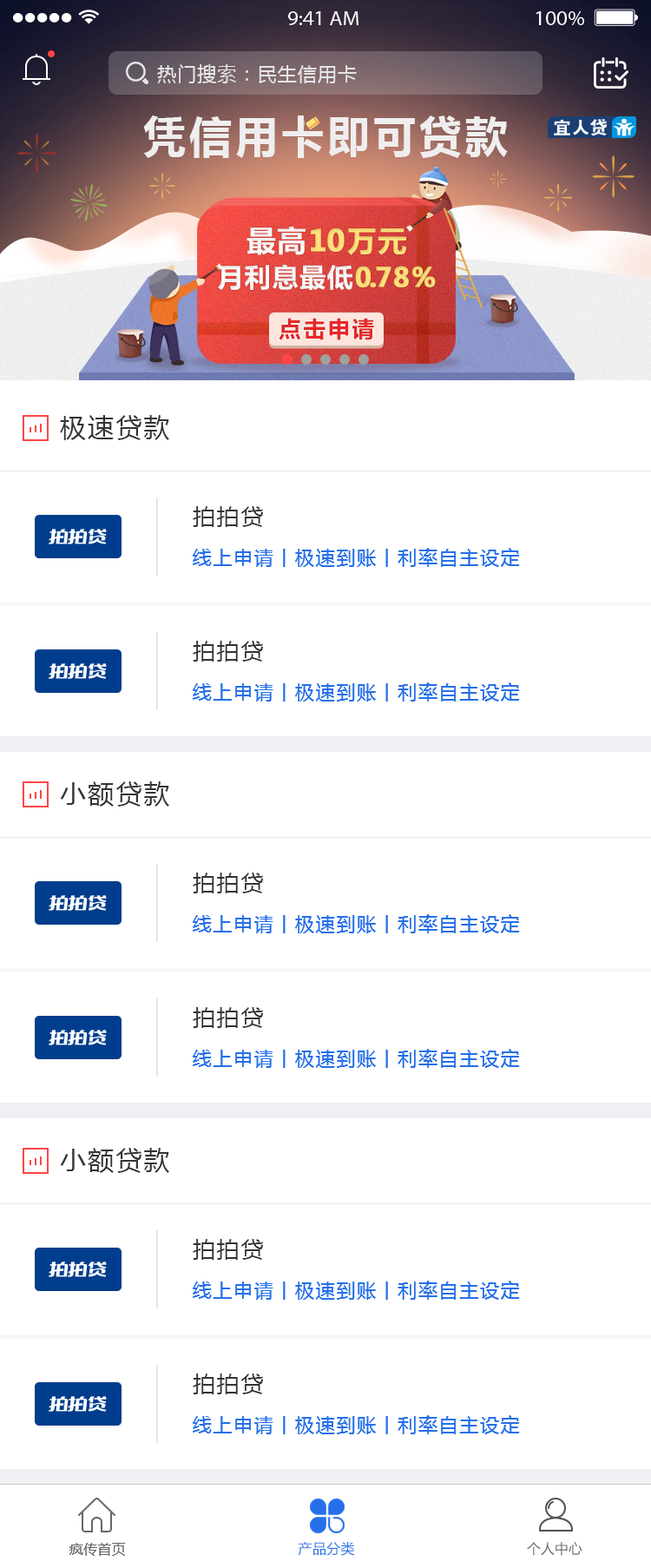
<style>
.page{position:relative;width:651px;height:1568px;background:#ffffff}
.page>*{position:absolute;margin:0}
.t1{font:26px "MicrosoftYaHei";letter-spacing:0.075em;color:#333333}
.t2{font:22.6px "MicrosoftYaHei";letter-spacing:0.075em;color:#333333}
.t3{font:19.1px "MicrosoftYaHei";letter-spacing:0.075em;color:#256fe9}
.t4{font:13.9px "MicrosoftYaHei";letter-spacing:0.02em;color:#256fe9}
.t5{font:13.6px "MicrosoftYaHei";letter-spacing:0.02em;color:#666666}
.t6{font:13.9px "MicrosoftYaHei";letter-spacing:0.025em;color:#666666}
</style>
<div class="page">
<p class="t1" style="left:60px;top:415px;width:109px;height:25px">极速贷款</p>
<p class="t2" style="left:193px;top:506px;width:70px;height:21px">拍拍贷</p>
<p class="t3" style="left:193px;top:548px;width:327px;height:19px">线上申请丨极速到账丨利率自主设定</p>
<p class="t2" style="left:193px;top:641px;width:70px;height:21px">拍拍贷</p>
<p class="t3" style="left:193px;top:682px;width:327px;height:20px">线上申请丨极速到账丨利率自主设定</p>
<p class="t1" style="left:60px;top:781px;width:109px;height:26px">小额贷款</p>
<p class="t2" style="left:193px;top:873px;width:70px;height:20px">拍拍贷</p>
<p class="t3" style="left:193px;top:914px;width:327px;height:19px">线上申请丨极速到账丨利率自主设定</p>
<p class="t2" style="left:193px;top:1007px;width:70px;height:21px">拍拍贷</p>
<p class="t3" style="left:193px;top:1049px;width:327px;height:19px">线上申请丨极速到账丨利率自主设定</p>
<p class="t1" style="left:60px;top:1148px;width:109px;height:25px">小额贷款</p>
<p class="t2" style="left:193px;top:1239px;width:70px;height:21px">拍拍贷</p>
<p class="t3" style="left:193px;top:1281px;width:327px;height:19px">线上申请丨极速到账丨利率自主设定</p>
<p class="t2" style="left:193px;top:1374px;width:70px;height:20px">拍拍贷</p>
<p class="t3" style="left:193px;top:1415px;width:327px;height:19px">线上申请丨极速到账丨利率自主设定</p>
<p class="t4" style="left:298px;top:1542px;width:57px;height:14px">产品分类</p>
<p class="t5" style="left:527px;top:1542px;width:56px;height:14px">个人中心</p>
<p class="t6" style="left:69px;top:1543px;width:57px;height:13px">疯传首页</p>
</div>
